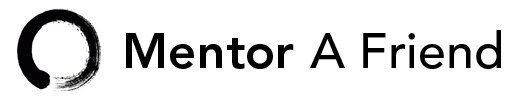
<style>
.page{position:relative;width:531px;height:102px;background:#ffffff}
.page>*{position:absolute;margin:0}
.t1{font:50px "AvenirLTStd-Medium";color:#000000}
.t2{font:50px "AvenirLTStd-Heavy";color:#000000}
</style>
<div class="page">
<p class="t1" style="left:126px;top:30px;width:375px;height:39px"><span class="t2">Mentor </span>A Friend</p>
</div>
